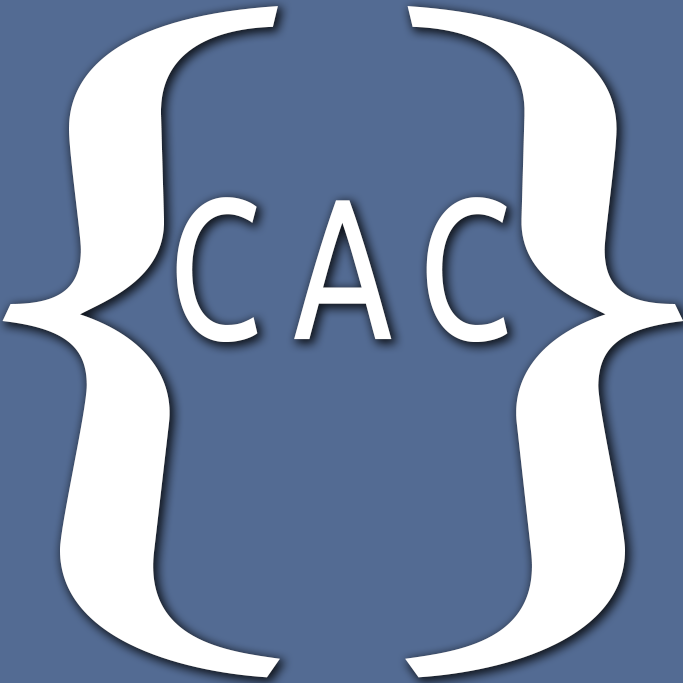
<style>
.page{position:relative;width:683px;height:683px;background:#536b93}
.page>*{position:absolute;margin:0}
.t1{font:739.2px "CharlemagneStd-Bold";letter-spacing:0.19em;color:#ffffff;scale:1.34 1}
.t2{font:200px "Ubuntu";letter-spacing:0.19em;color:#ffffff;scale:0.75 1}
</style>
<div class="page">
<p class="t1" style="left:2px;top:6px;width:278px;height:672px">{</p>
<p class="t1" style="left:405px;top:6px;width:279px;height:672px">}</p>
<p class="t2" style="left:176px;top:197px;width:332px;height:145px">CAC</p>
</div>
